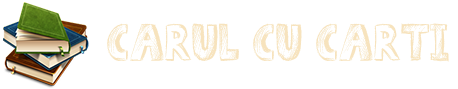
<style>
.page{position:relative;width:458px;height:89px;background:#ffffff}
.page>*{position:absolute;margin:0}
.t1{font:52.9px "Sketch-Book";color:#f7e4be}
</style>
<div class="page">
<p class="t1" style="left:107px;top:23px;width:342px;height:39px">Carul cu carti</p>
</div>
